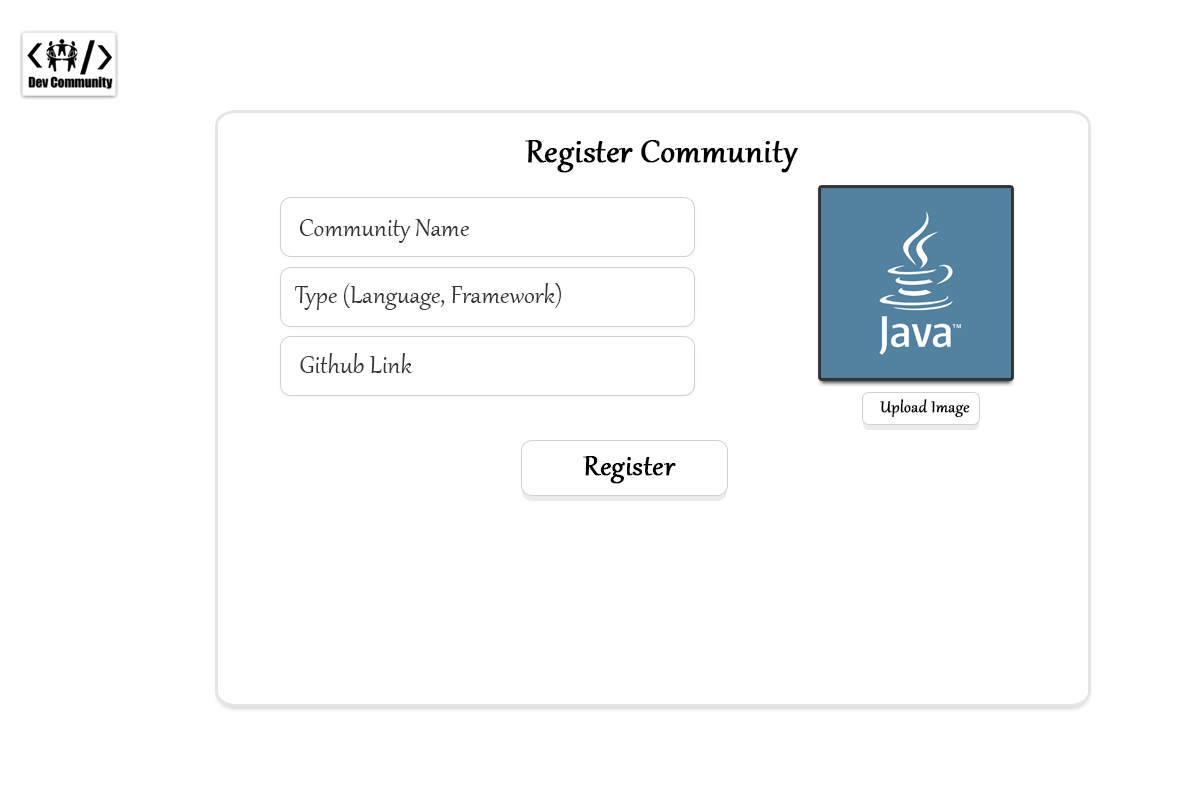
<style>
.page{position:relative;width:1200px;height:800px;background:#ffffff}
.page>*{position:absolute;margin:0}
.t1{font:40px "Gabriola";color:#000000;font-weight:bold}
.t2{font:30px "Gabriola";color:#333333}
.t3{font:19.4px "Gabriola";color:#000000;font-weight:bold}
.t4{font:34px "Gabriola";color:#000000;font-weight:bold}
</style>
<div class="page">
<p class="t1" style="left:525px;top:140px;width:273px;height:33px">Register Community</p>
<p class="t2" style="left:299px;top:219px;width:170px;height:24px">Community Name</p>
<p class="t2" style="left:295px;top:283px;width:267px;height:27px">Type (Language, Framework)</p>
<p class="t2" style="left:300px;top:353px;width:113px;height:20px">Github Link</p>
<p class="t3" style="left:880px;top:399px;width:90px;height:19px">Upload Image</p>
<p class="t4" style="left:583px;top:456px;width:93px;height:28px">Register</p>
</div>
